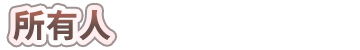
<style>
.page{position:relative;width:360px;height:50px;background:#ffffff}
.page>*{position:absolute;margin:0}
.t1{font:32px "SourceHanSansSC-Bold";font-weight:bold}
</style>
<div class="page">
<p class="t1" style="left:13px;top:9px;width:98px;height:32px">所有人</p>
</div>
